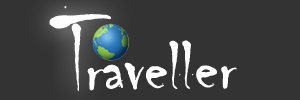
<style>
.page{position:relative;width:300px;height:100px;background:#333333}
.page>*{position:absolute;margin:0}
.t1{font:117px "Chiller-Regular";color:#ffffff}
.t2{font:72px "Chiller-Regular";color:#ffffff}
</style>
<div class="page">
<p class="t1" style="left:49px;top:6px;width:62px;height:85px;rotate:-2deg">T</p>
<p class="t2" style="left:87px;top:40px;width:150px;height:51px;rotate:-1deg">raveller</p>
</div>
